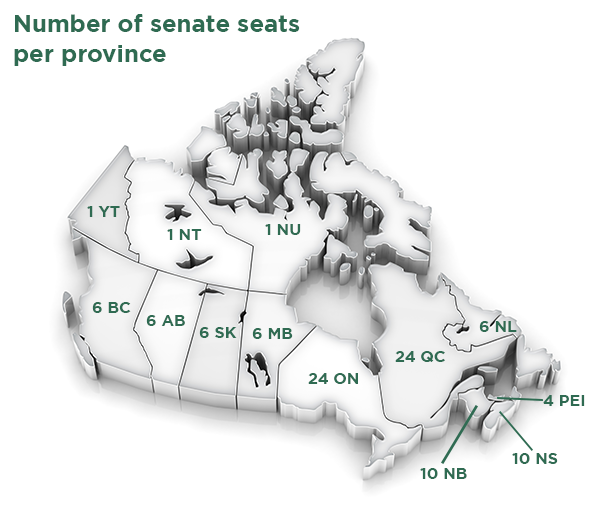
<style>
.page{position:relative;width:600px;height:525px;background:#ffffff}
.page>*{position:absolute;margin:0}
.t1{font:24px/30px "Gotham-Bold";color:#2f6b52}
.t2{font:16px "Gotham-Bold";color:#2f6b52}
</style>
<div class="page">
<p class="t1" style="left:14px;top:14px;width:286px;height:52px">Number of senate seats <br>per province</p>
<p class="t2" style="left:87px;top:206px;width:33px;height:11px">1 YT</p>
<p class="t2" style="left:167px;top:229px;width:35px;height:11px">1 NT</p>
<p class="t2" style="left:265px;top:224px;width:36px;height:11px">1 NU</p>
<p class="t2" style="left:92px;top:302px;width:39px;height:11px">6 BC</p>
<p class="t2" style="left:146px;top:315px;width:39px;height:11px">6 AB</p>
<p class="t2" style="left:199px;top:327px;width:38px;height:11px">6 SK</p>
<p class="t2" style="left:252px;top:328px;width:41px;height:11px">6 MB</p>
<p class="t2" style="left:479px;top:321px;width:38px;height:11px">6 NL</p>
<p class="t2" style="left:395px;top:351px;width:50px;height:11px">24 QC</p>
<p class="t2" style="left:308px;top:373px;width:50px;height:11px">24 ON</p>
<p class="t2" style="left:543px;top:395px;width:42px;height:11px">4 PEI</p>
<p class="t2" style="left:512px;top:453px;width:46px;height:11px">10 NS</p>
<p class="t2" style="left:420px;top:468px;width:47px;height:11px">10 NB</p>
</div>
